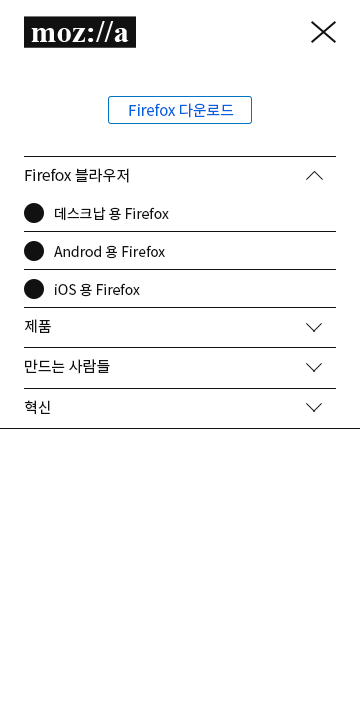
<style>
.page{position:relative;width:360px;height:720px;background:#ffffff}
.page>*{position:absolute;margin:0}
.t1{font:15px "NotoSansKR-Regular";color:#0060df}
.t2{font:15px "NotoSansKR-Regular";color:#111111}
.t3{font:14px "NotoSansKR-Regular";color:#111111}
</style>
<div class="page">
<p class="t1" style="left:129px;top:103px;width:105px;height:15px">Firefox 다운로드</p>
<p class="t2" style="left:25px;top:168px;width:104px;height:15px">Firefox 블라우저</p>
<p class="t3" style="left:55px;top:207px;width:114px;height:14px">데스크납 용 Firefox</p>
<p class="t3" style="left:54px;top:245px;width:111px;height:14px">Androd 용 Firefox</p>
<p class="t3" style="left:55px;top:283px;width:85px;height:14px">iOS 용 Firefox</p>
<p class="t2" style="left:24px;top:319px;width:27px;height:14px">제품</p>
<p class="t2" style="left:25px;top:359px;width:85px;height:15px">만드는 사람들</p>
<p class="t2" style="left:24px;top:400px;width:26px;height:15px">혁신</p>
</div>
